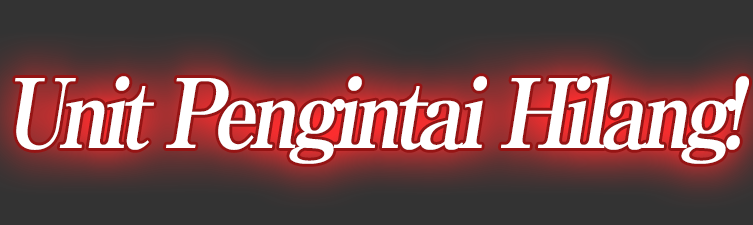
<style>
.page{position:relative;width:753px;height:225px;background:#333333}
.page>*{position:absolute;margin:0}
.t1{font:96px "RyuminPro-ExBold";letter-spacing:-0.08em;color:#ffffff;font-style:italic;scale:0.9 1}
</style>
<div class="page">
<p class="t1" style="left:15px;top:76px;width:734px;height:88px">Unit Pengintai Hilang!</p>
</div>
